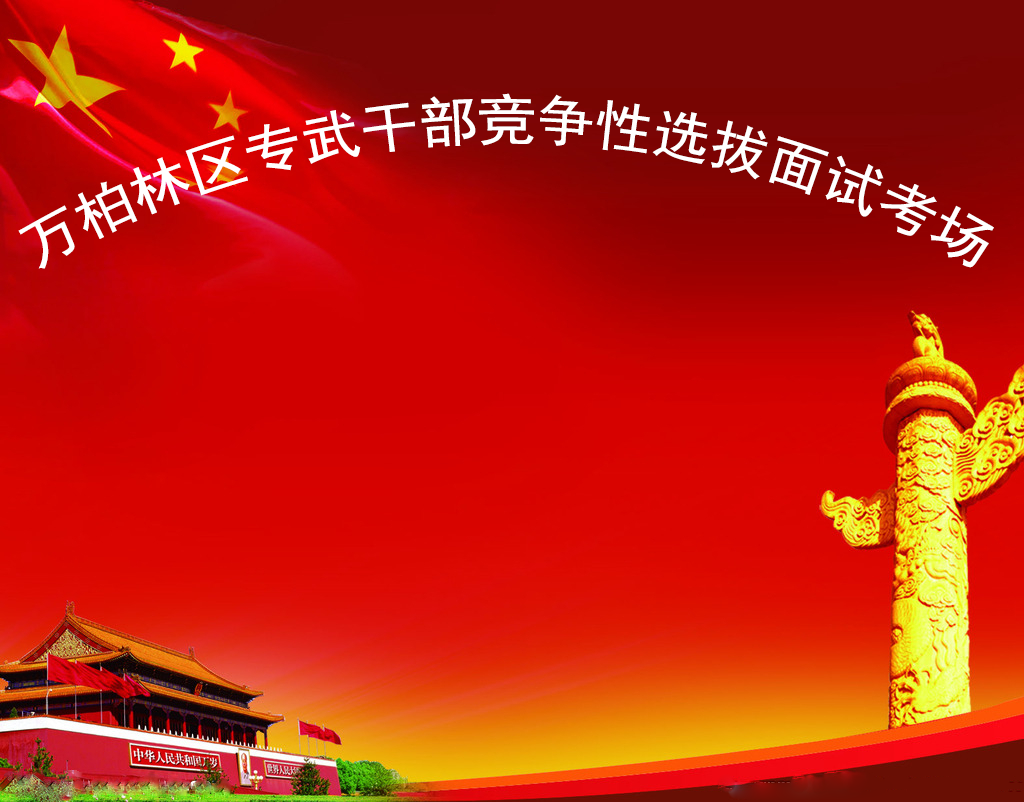
<style>
.page{position:relative;width:1024px;height:802px}
.page>*{position:absolute;margin:0}
.t1{font:55px "SimHei";color:#ffffff}
</style>
<div class="page">
<p class="t1" style="left:18px;top:93px;width:976px;height:176px">万柏林区专武干部竞争性选拔面试考场</p>
</div>
